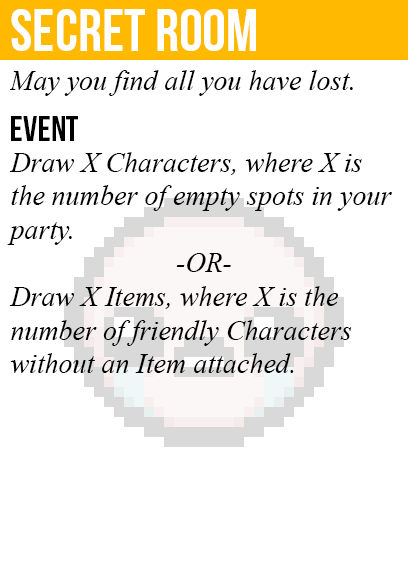
<style>
.page{position:relative;width:408px;height:585px;background:#ffffff}
.page>*{position:absolute;margin:0}
.t1{font:60px "BebasNeue";color:#ffffff}
.t2{font:28px "TimesNewRomanPS-ItalicMT";color:#000000}
.t3{font:36px "BebasNeue";color:#000000}
</style>
<div class="page">
<p class="t1" style="left:11px;top:9px;width:245px;height:42px">secret room</p>
<p class="t2" style="left:10px;top:70px;width:343px;height:26px">May you find all you have lost.</p>
<p class="t3" style="left:11px;top:116px;width:67px;height:25px">event</p>
<p class="t2" style="left:7px;top:152px;width:385px;height:221px">Draw X Characters, where X is<br>the number of empty spots in your<br>party.<br><br>Draw X Items, where X is the<br>number of friendly Characters<br>without an Item attached.</p>
<p class="t2" style="left:176px;top:253px;width:55px;height:19px">-OR-</p>
</div>
